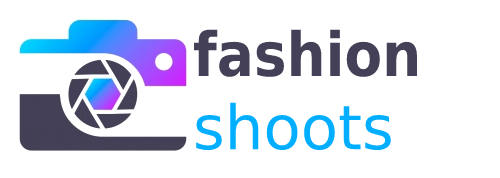
<style>
.page{position:relative;width:500px;height:178px;background:#ffffff}
.page>*{position:absolute;margin:0}
.t1{font:61px "DejaVuSansCondensed-Bold";color:#444057}
.t2{font:61px "DejaVuSans";color:#02aeff}
</style>
<div class="page">
<p class="t1" style="left:194px;top:29px;width:223px;height:122px">fashion<br><span class="t2">shoots</span></p>
</div>
